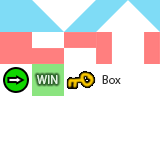
<style>
.page{position:relative;width:160px;height:160px;background:#ffffff}
.page>*{position:absolute;margin:0}
.t1{font:12px "MyriadPro-Regular";color:#e2f6e1}
.t2{font:12px "MyriadPro-Regular";color:#333333}
</style>
<div class="page">
<p class="t1" style="left:37px;top:75px;width:21px;height:9px">WIN</p>
<p class="t2" style="left:102px;top:75px;width:19px;height:9px">Box</p>
</div>
